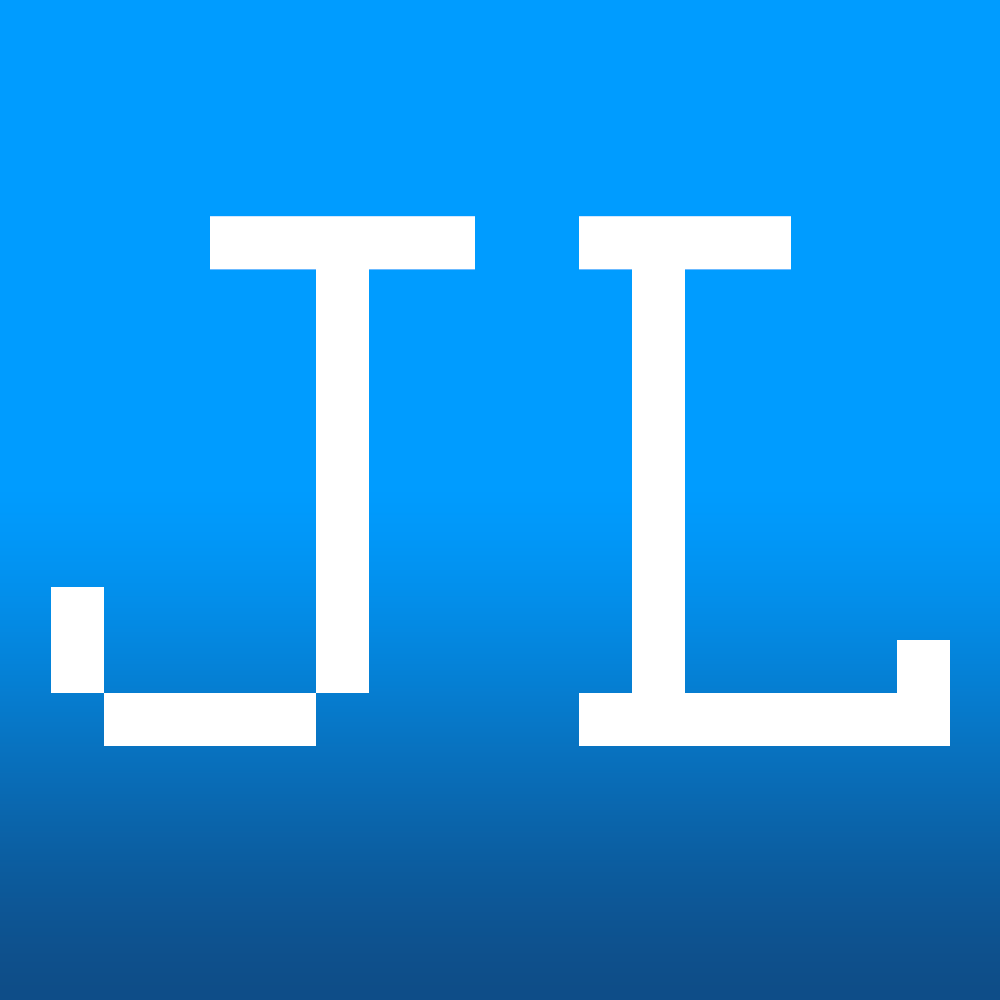
<style>
.page{position:relative;width:1000px;height:1000px;background:#009cff}
.page>*{position:absolute;margin:0}
.t1{font:847.5px "Courier";letter-spacing:0.06em;color:#ffffff;text-transform:uppercase}
</style>
<div class="page">
<p class="t1" style="left:51px;top:216px;width:899px;height:530px">JL</p>
</div>
